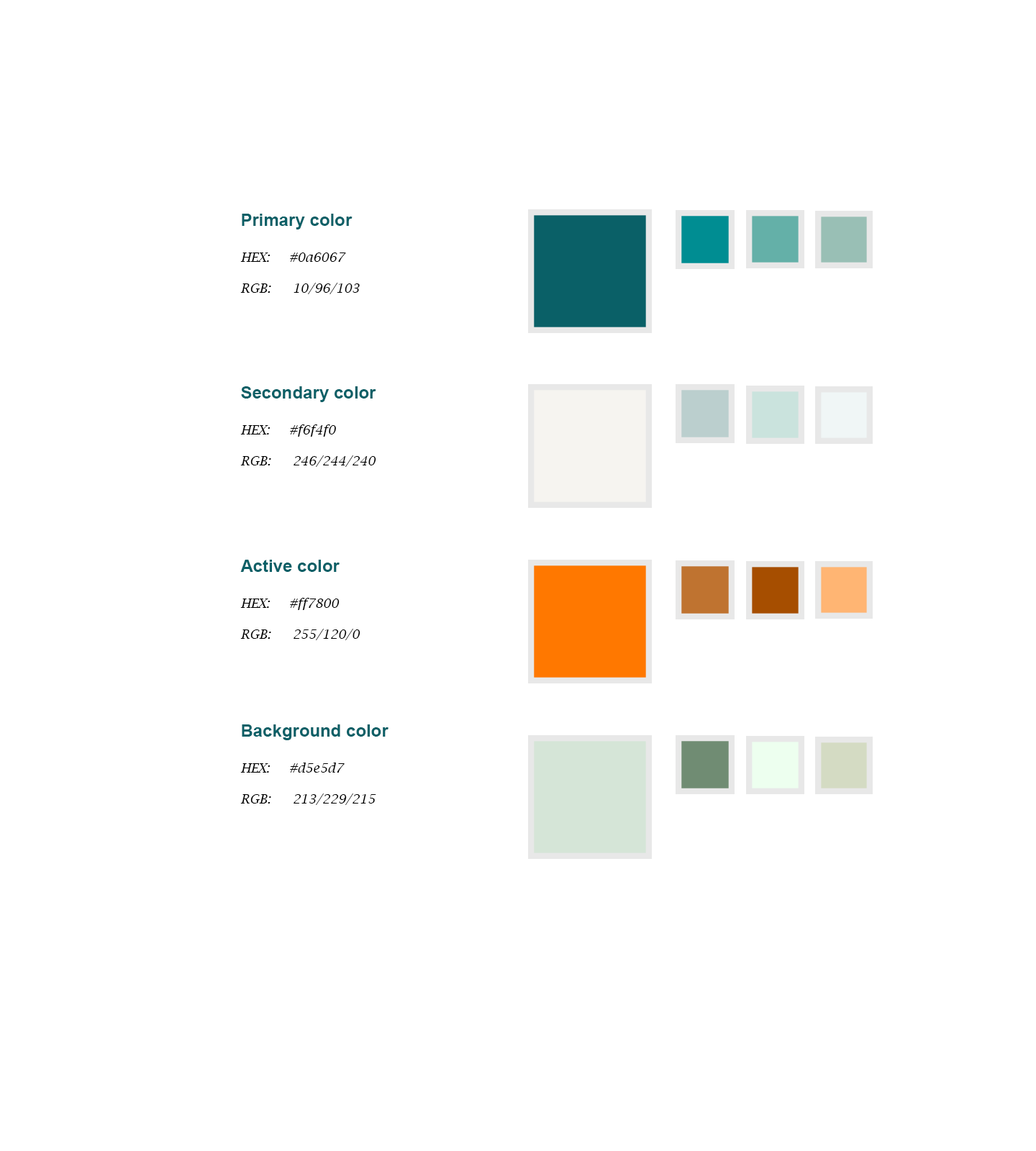
<style>
.page{position:relative;width:1036px;height:1151px;background:#ffffff}
.page>*{position:absolute;margin:0}
.t1{font:12.9px "LucidaBright-Italic";color:#000000}
.t2{font:17.3px "Arial-BoldMT";color:#0a6067}
</style>
<div class="page">
<p class="t1" style="left:240px;top:214px;width:120px;height:80px"><span class="t2">Primary color<br><br></span>HEX:     #0a6067<br><br>RGB:  10/96/103</p>
<p class="t1" style="left:240px;top:386px;width:136px;height:81px"><span class="t2">Secondary color<br><br></span>HEX:     #f6f4f0<br><br>RGB:  246/244/240</p>
<p class="t1" style="left:240px;top:560px;width:120px;height:80px"><span class="t2">Active color<br><br></span>HEX:     #ff7800<br><br>RGB:  255/120/0</p>
<p class="t1" style="left:240px;top:724px;width:148px;height:81px"><span class="t2">Background color<br><br></span>HEX:     #d5e5d7<br><br>RGB:  213/229/215</p>
</div>
